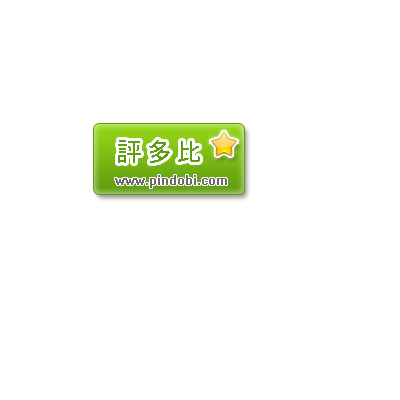
<style>
.page{position:relative;width:400px;height:400px;background:#ffffff}
.page>*{position:absolute;margin:0}
.t1{font:26px "MS-Gothic";color:#5f9d10}
.t2{font:10px "System";color:#6b6969}
</style>
<div class="page">
<p class="t1" style="left:118px;top:140px;width:82px;height:23px">評 多 比</p>
<p class="t2" style="left:115px;top:175px;width:112px;height:13px">www.pindobi.com</p>
</div>
